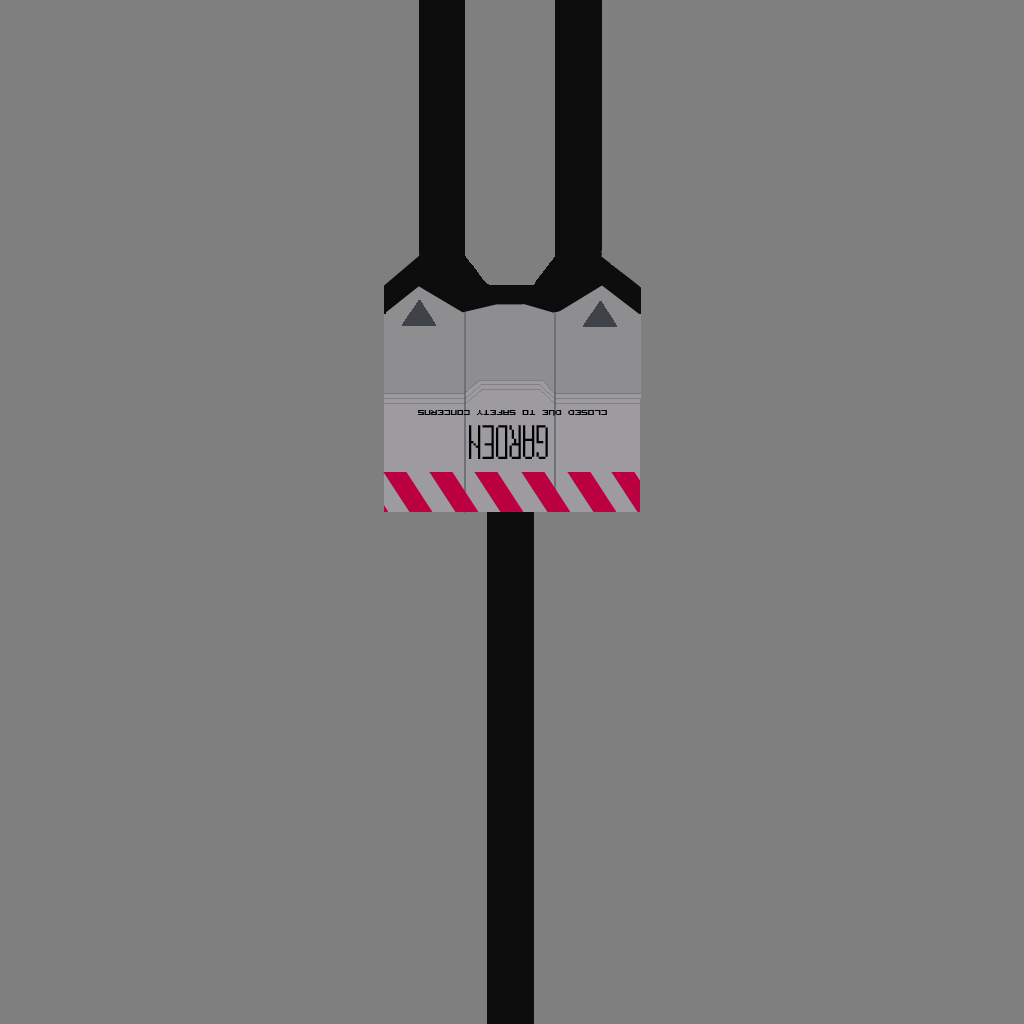
<style>
.page{position:relative;width:1024px;height:1024px;background:#7f7f7f}
.page>*{position:absolute;margin:0}
.t1{font:14px "VisitorTT2BRK";color:#000000}
.t2{font:36px "15x5";color:#000000}
</style>
<div class="page">
<p class="t1" style="left:418px;top:410px;width:189px;height:6px;rotate:180deg">Closed due to safety concerns</p>
<p class="t2" style="left:469px;top:425px;width:79px;height:34px;rotate:180deg">GARDEN</p>
</div>
